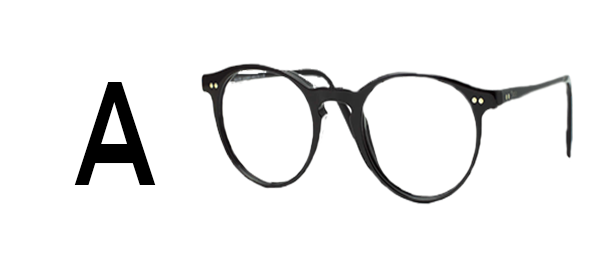
<style>
.page{position:relative;width:600px;height:266px;background:#ffffff}
.page>*{position:absolute;margin:0}
.t1{font:200px "BankGothicBT-Medium";color:#000000;scale:0.57 1}
</style>
<div class="page">
<p class="t1" style="left:74px;top:82px;width:82px;height:103px">A</p>
</div>
